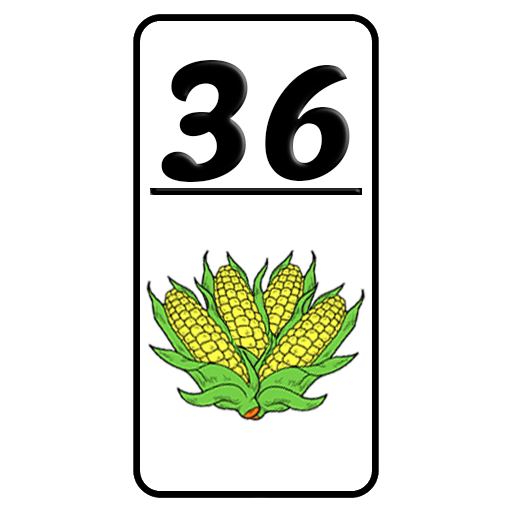
<style>
.page{position:relative;width:512px;height:512px;background:#ffffff}
.page>*{position:absolute;margin:0}
.t1{font:141.7px "Lemonada-Bold";letter-spacing:-0.025em;color:#000000}
.t2{font:136.1px "Lemonada-Bold";letter-spacing:-0.025em;color:#000000}
</style>
<div class="page">
<p class="t1" style="left:161px;top:60px;width:87px;height:122px">3</p>
<p class="t2" style="left:265px;top:65px;width:85px;height:116px">6</p>
</div>
